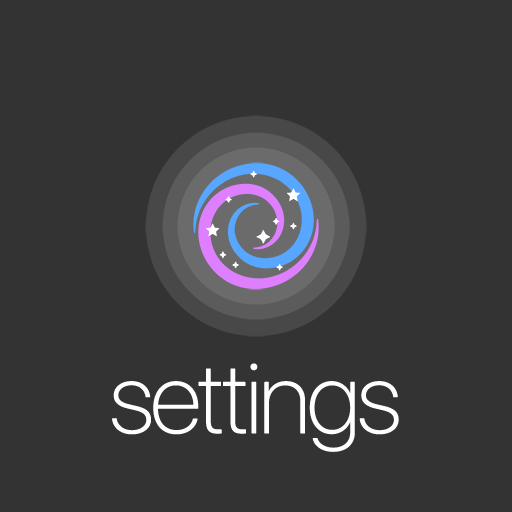
<style>
.page{position:relative;width:512px;height:512px;background:#333333}
.page>*{position:absolute;margin:0}
.t1{font:100px "SFProDisplay-Thin";letter-spacing:-0.04em;color:#ffffff;font-weight:bold}
</style>
<div class="page">
<p class="t1" style="left:112px;top:363px;width:287px;height:89px">settings</p>
</div>
